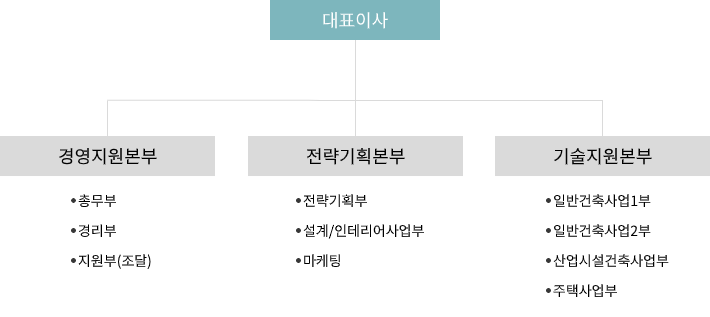
<style>
.page{position:relative;width:710px;height:317px;background:#ffffff}
.page>*{position:absolute;margin:0}
.t1{font:18px "NotoSansKR-Regular";color:#ffffff}
.t2{font:18px "NotoSansKR-Regular";color:#000000}
.t3{font:14px "NotoSansKR-Regular";color:#000000}
</style>
<div class="page">
<p class="t1" style="left:323px;top:12px;width:65px;height:17px">대표이사</p>
<p class="t2" style="left:59px;top:148px;width:98px;height:17px">경영지원본부</p>
<p class="t2" style="left:307px;top:148px;width:98px;height:17px">전략기획본부</p>
<p class="t2" style="left:554px;top:148px;width:98px;height:17px">기술지원본부</p>
<p class="t3" style="left:78px;top:194px;width:38px;height:14px">총무부</p>
<p class="t3" style="left:303px;top:194px;width:64px;height:14px">전략기획부</p>
<p class="t3" style="left:554px;top:194px;width:97px;height:14px">일반건축사업1부</p>
<p class="t3" style="left:78px;top:224px;width:38px;height:14px">경리부</p>
<p class="t3" style="left:303px;top:224px;width:121px;height:15px">설계/인테리어사업부</p>
<p class="t3" style="left:554px;top:224px;width:97px;height:14px">일반건축사업2부</p>
<p class="t3" style="left:78px;top:254px;width:73px;height:15px">지원부(조달)</p>
<p class="t3" style="left:304px;top:254px;width:36px;height:14px">마케팅</p>
<p class="t3" style="left:553px;top:254px;width:116px;height:14px">산업시설건축사업부</p>
<p class="t3" style="left:553px;top:284px;width:64px;height:14px">주택사업부</p>
</div>
